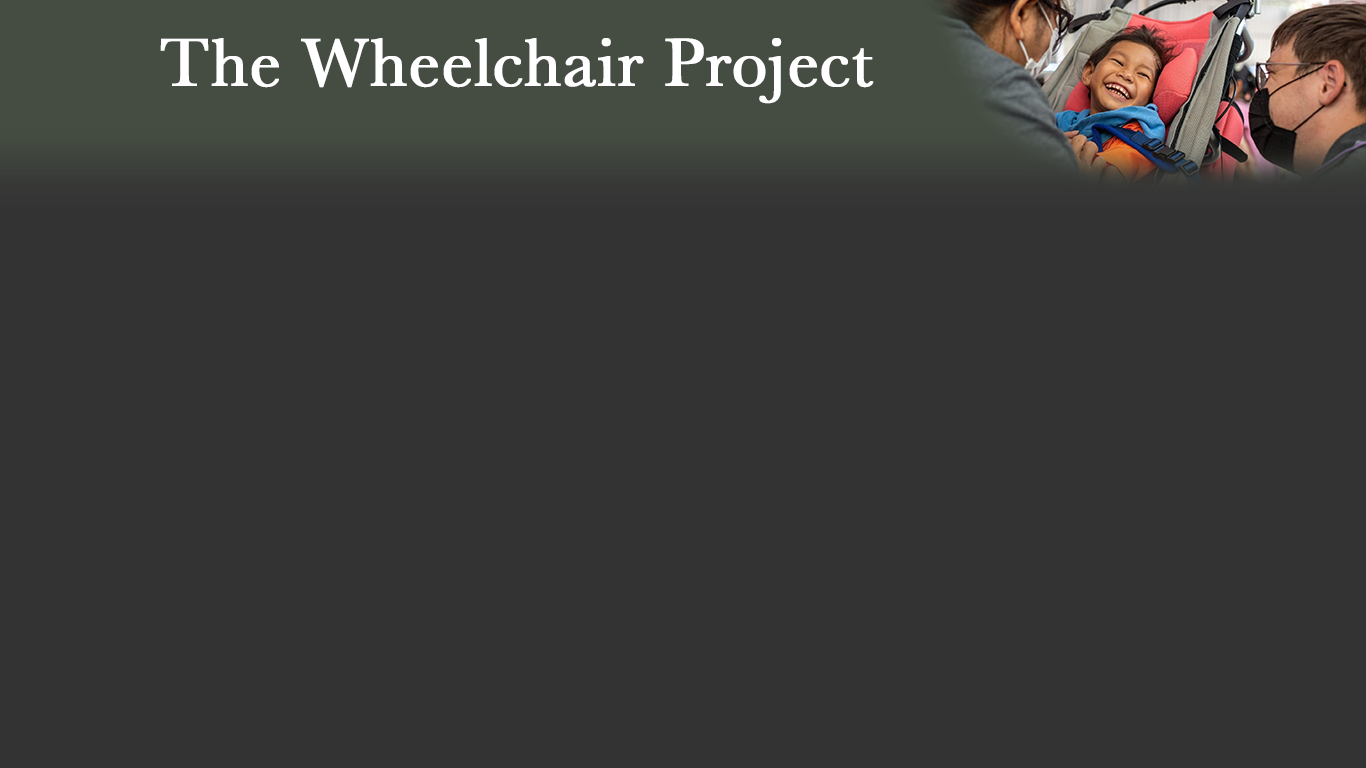
<style>
.page{position:relative;width:1366px;height:768px;background:#333333}
.page>*{position:absolute;margin:0}
.t1{font:70px "Baskerville";color:#ffffff;font-weight:bold}
</style>
<div class="page">
<p class="t1" style="left:160px;top:38px;width:714px;height:66px">The Wheelchair Project</p>
</div>
